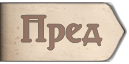
<style>
.page{position:relative;width:129px;height:64px}
.page>*{position:absolute;margin:0}
.t1{font:38px "Casanova";color:#957767}
</style>
<div class="page">
<p class="t1" style="left:21px;top:15px;width:81px;height:35px">Пред</p>
</div>
